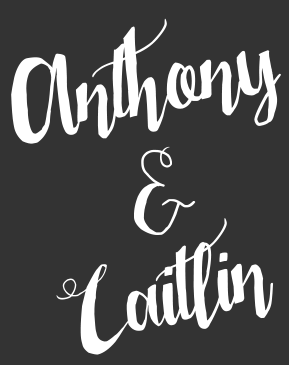
<style>
.page{position:relative;width:289px;height:365px;background:#333333}
.page>*{position:absolute;margin:0}
.t1{font:120px "LaserMetal";color:#ffffff}
</style>
<div class="page">
<p class="t1" style="left:11px;top:18px;width:270px;height:126px;rotate:-10deg">Anthony</p>
<p class="t1" style="left:134px;top:146px;width:62px;height:89px">&amp;</p>
<p class="t1" style="left:56px;top:218px;width:218px;height:137px;rotate:-14deg">Caitlin</p>
</div>
